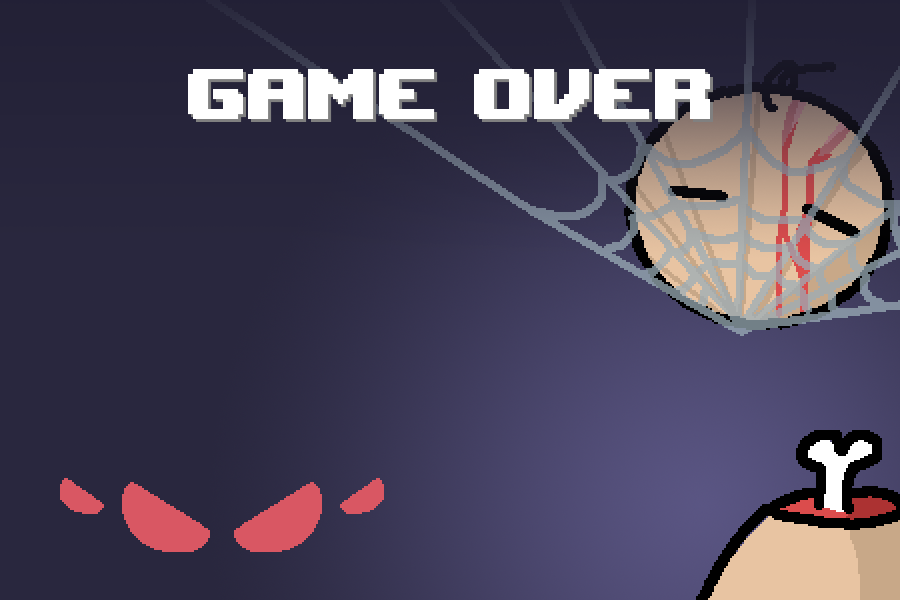
<style>
.page{position:relative;width:900px;height:600px}
.page>*{position:absolute;margin:0}
.t1{font:99.9px "UpheavalTT-BRK-";color:#ffffff}
</style>
<div class="page">
<p class="t1" style="left:188px;top:69px;width:522px;height:50px">GAME OVER</p>
<p class="t1" style="left:191px;top:72px;width:522px;height:50px">GAME OVER</p>
</div>
